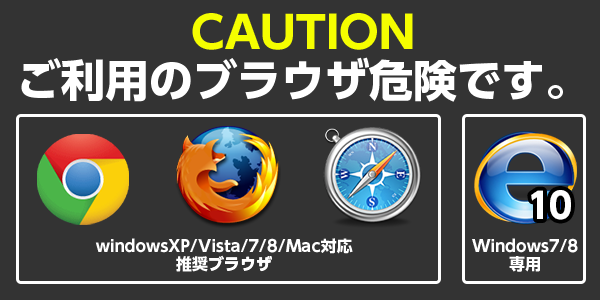
<style>
.page{position:relative;width:600px;height:300px;background:#333333}
.page>*{position:absolute;margin:0}
.t1{font:44px/48px "UDShinGoPro-Bold";color:#ffffff}
.t2{font:44px/48px "UDShinGoPro-Bold";color:#f5fe00}
.t3{font:16px/18px "UDShinGoPro-Bold";color:#ffffff}
</style>
<div class="page">
<p class="t1" style="left:21px;top:13px;width:542px;height:89px;text-align:center"><span class="t2">CAUTION<br></span>ご利用のブラウザ危険です。</p>
<p class="t3" style="left:95px;top:238px;width:258px;height:34px;text-align:center">windowsXP/Vista/7/8/Mac対応<br>推奨ブラウザ</p>
<p class="t3" style="left:472px;top:238px;width:106px;height:34px;text-align:center">Windows7/8<br>専用</p>
</div>
